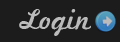
<style>
.page{position:relative;width:120px;height:42px;background:#1c1c1c}
.page>*{position:absolute;margin:0}
.t1{font:30px "MarketingScript";color:#bbbbbb}
</style>
<div class="page">
<p class="t1" style="left:19px;top:9px;width:72px;height:27px">Login</p>
</div>
